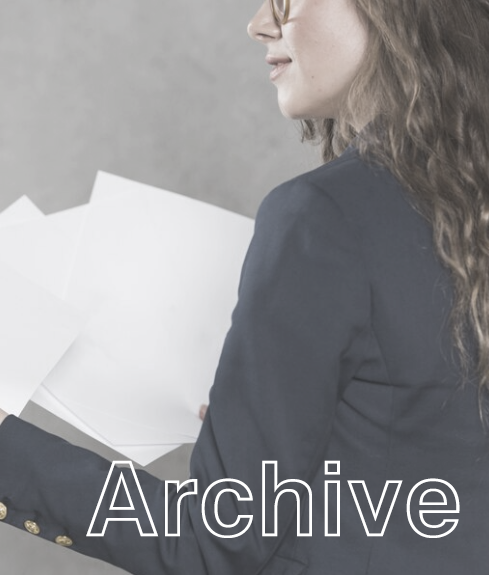
<style>
.page{position:relative;width:489px;height:575px}
.page>*{position:absolute;margin:0}
.t1{font:104.4px "Swiss721BT-BoldOutline";color:#ffffff}
</style>
<div class="page">
<p class="t1" style="left:86px;top:460px;width:374px;height:78px">Archive</p>
</div>
